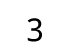
<style>
.page{position:relative;width:70px;height:55px;background:#ffffff}
.page>*{position:absolute;margin:0}
.t1{font:31.8px "DroidSans";color:#000000}
</style>
<div class="page">
<p class="t1" style="left:27px;top:18px;width:15px;height:24px">3</p>
</div>
